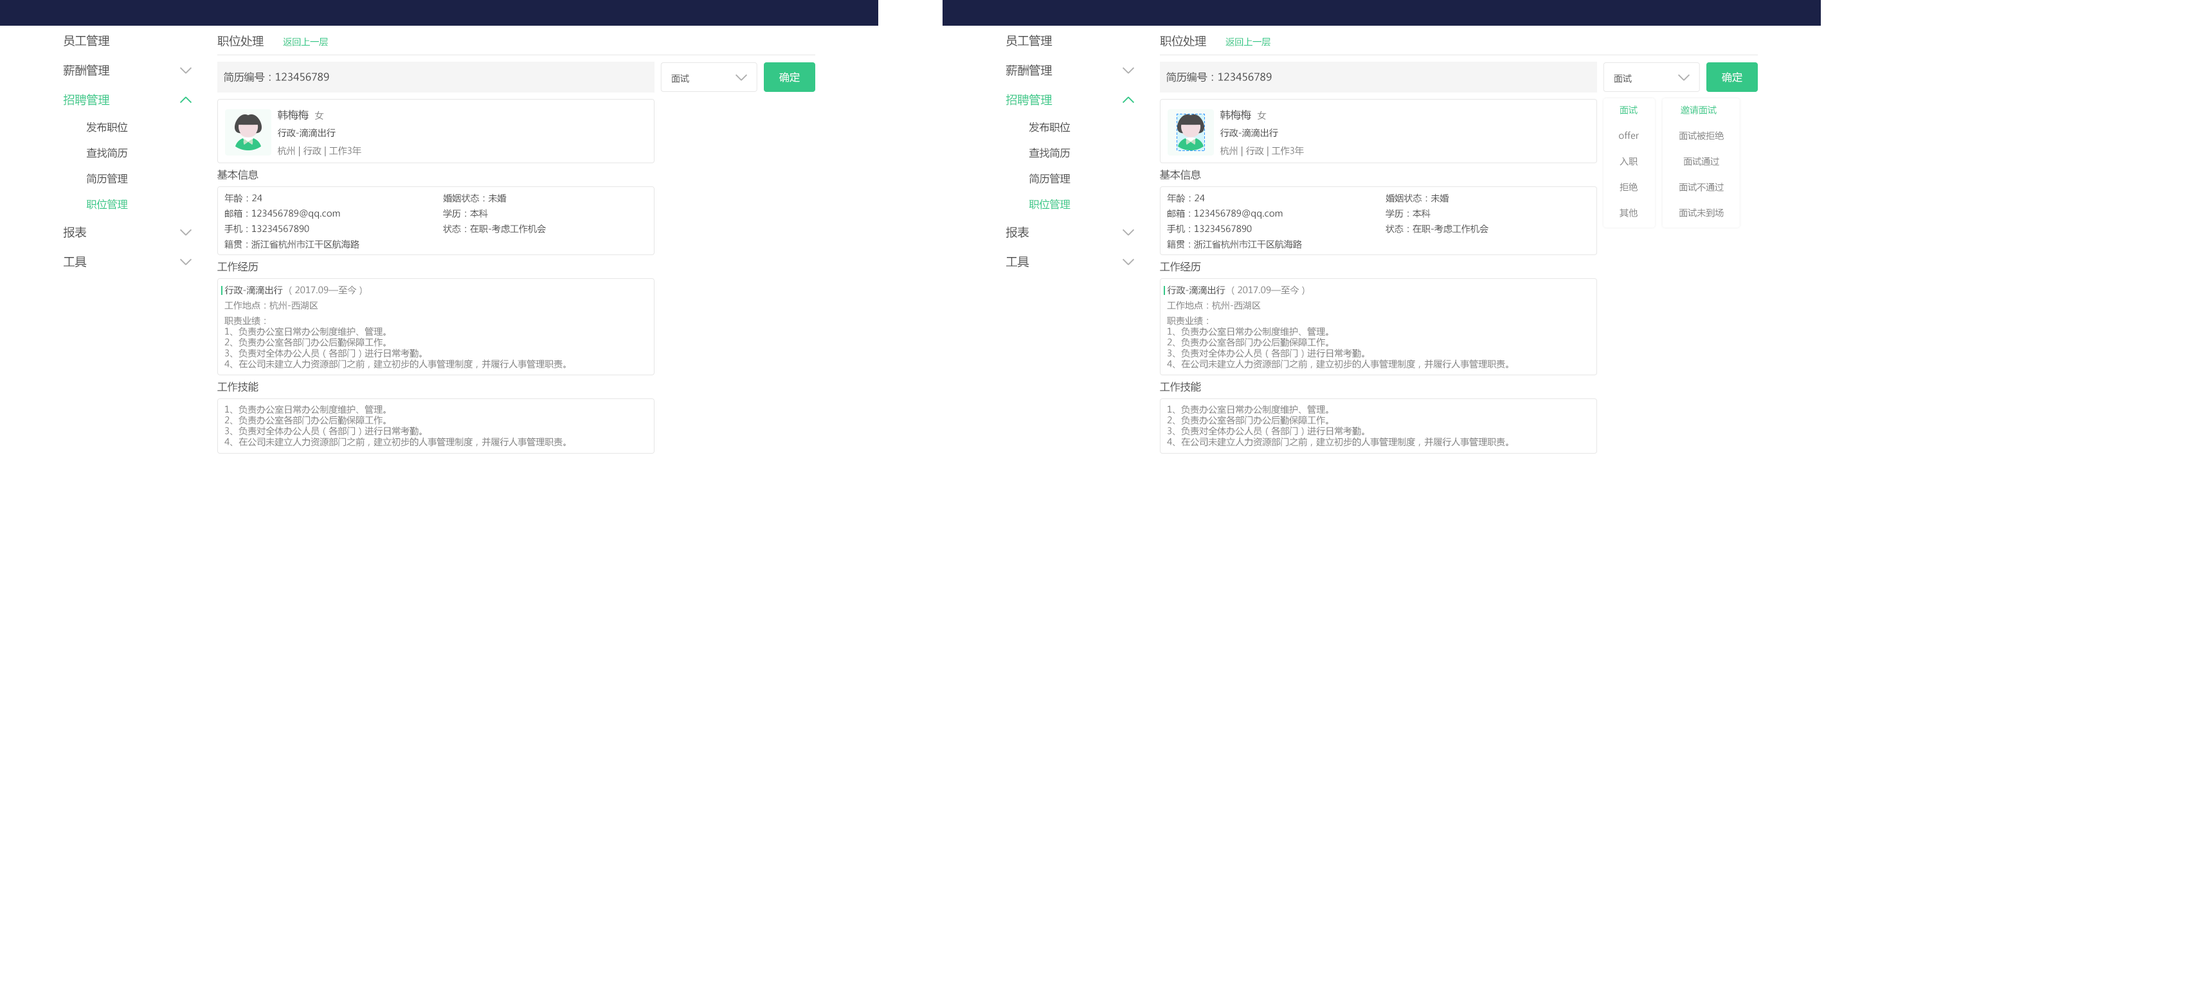
<style>
.page{position:relative;width:2195px;height:987px;background:#ffffff}
.page>*{position:absolute;margin:0}
.t1{font:11.6px "MicrosoftYaHei";color:#4d4d4d}
.t2{font:9px "MicrosoftYaHei";color:#35c787}
.t3{font:10.3px "MicrosoftYaHei";color:#4d4d4d}
.t4{font:9px "MicrosoftYaHei";color:#4d4d4d}
.t5{font:10.3px "MicrosoftYaHei";color:#ffffff}
.t6{font:11.6px "MicrosoftYaHei";color:#35c787}
.t7{font:9px "MicrosoftYaHei";color:#808080}
.t8{font:10.3px "MicrosoftYaHei";color:#35c787}
.t9{font:8.8px "MicrosoftYaHei";color:#4d4d4d}
.t10{font:8.8px "MicrosoftYaHei";color:#808080}
</style>
<div class="page">
<p class="t1" style="left:64px;top:35px;width:46px;height:11px">员工管理</p>
<p class="t1" style="left:217px;top:35px;width:47px;height:12px">职位处理</p>
<p class="t2" style="left:283px;top:37px;width:45px;height:9px">返回上一层</p>
<p class="t1" style="left:1006px;top:35px;width:46px;height:11px">员工管理</p>
<p class="t1" style="left:1160px;top:35px;width:46px;height:12px">职位处理</p>
<p class="t2" style="left:1225px;top:37px;width:45px;height:9px">返回上一层</p>
<p class="t1" style="left:63px;top:64px;width:47px;height:12px">薪酬管理</p>
<p class="t1" style="left:1005px;top:64px;width:47px;height:12px">薪酬管理</p>
<p class="t3" style="left:224px;top:72px;width:105px;height:10px">简历编号：123456789</p>
<p class="t4" style="left:671px;top:74px;width:18px;height:9px">面试</p>
<p class="t5" style="left:779px;top:72px;width:21px;height:10px">确定</p>
<p class="t3" style="left:1166px;top:72px;width:106px;height:10px">简历编号：123456789</p>
<p class="t4" style="left:1614px;top:74px;width:18px;height:9px">面试</p>
<p class="t5" style="left:1722px;top:72px;width:20px;height:10px">确定</p>
<p class="t6" style="left:63px;top:94px;width:47px;height:11px">招聘管理</p>
<p class="t6" style="left:1005px;top:94px;width:47px;height:11px">招聘管理</p>
<p class="t3" style="left:278px;top:110px;width:31px;height:10px">韩梅梅</p>
<p class="t7" style="left:315px;top:111px;width:9px;height:9px">女</p>
<p class="t3" style="left:1220px;top:110px;width:31px;height:10px">韩梅梅</p>
<p class="t7" style="left:1257px;top:111px;width:9px;height:9px">女</p>
<p class="t2" style="left:1619px;top:105px;width:18px;height:9px">面试</p>
<p class="t2" style="left:1680px;top:105px;width:36px;height:9px">邀请面试</p>
<p class="t3" style="left:86px;top:122px;width:42px;height:10px">发布职位</p>
<p class="t3" style="left:1029px;top:122px;width:41px;height:10px">发布职位</p>
<p class="t4" style="left:278px;top:128px;width:58px;height:10px">行政-滴滴出行</p>
<p class="t4" style="left:1220px;top:128px;width:58px;height:10px">行政-滴滴出行</p>
<p class="t7" style="left:1619px;top:131px;width:20px;height:9px">offer</p>
<p class="t7" style="left:1679px;top:131px;width:45px;height:9px">面试被拒绝</p>
<p class="t3" style="left:86px;top:148px;width:42px;height:10px">查找简历</p>
<p class="t7" style="left:278px;top:146px;width:83px;height:11px">杭州 | 行政 | 工作3年</p>
<p class="t3" style="left:1029px;top:148px;width:41px;height:10px">查找简历</p>
<p class="t7" style="left:1220px;top:146px;width:84px;height:11px">杭州 | 行政 | 工作3年</p>
<p class="t7" style="left:1619px;top:157px;width:18px;height:9px">入职</p>
<p class="t7" style="left:1683px;top:157px;width:36px;height:9px">面试通过</p>
<p class="t3" style="left:86px;top:174px;width:42px;height:10px">简历管理</p>
<p class="t3" style="left:217px;top:170px;width:41px;height:10px">基本信息</p>
<p class="t3" style="left:1029px;top:174px;width:41px;height:10px">简历管理</p>
<p class="t3" style="left:1160px;top:170px;width:41px;height:10px">基本信息</p>
<p class="t7" style="left:1619px;top:183px;width:18px;height:9px">拒绝</p>
<p class="t7" style="left:1679px;top:183px;width:45px;height:9px">面试不通过</p>
<p class="t4" style="left:224px;top:194px;width:38px;height:9px">年龄：24</p>
<p class="t4" style="left:443px;top:194px;width:64px;height:9px">婚姻状态：未婚</p>
<p class="t4" style="left:1167px;top:194px;width:38px;height:9px">年龄：24</p>
<p class="t4" style="left:1385px;top:194px;width:64px;height:9px">婚姻状态：未婚</p>
<p class="t8" style="left:86px;top:199px;width:42px;height:11px">职位管理</p>
<p class="t9" style="left:225px;top:209px;width:115px;height:10px">邮箱：123456789@qq.com</p>
<p class="t9" style="left:443px;top:209px;width:45px;height:9px">学历：本科</p>
<p class="t8" style="left:1029px;top:199px;width:41px;height:11px">职位管理</p>
<p class="t9" style="left:1167px;top:209px;width:115px;height:10px">邮箱：123456789@qq.com</p>
<p class="t9" style="left:1385px;top:209px;width:45px;height:9px">学历：本科</p>
<p class="t7" style="left:1619px;top:208px;width:18px;height:9px">其他</p>
<p class="t7" style="left:1679px;top:208px;width:45px;height:9px">面试未到场</p>
<p class="t1" style="left:63px;top:226px;width:24px;height:12px">报表</p>
<p class="t4" style="left:224px;top:224px;width:85px;height:9px">手机：13234567890</p>
<p class="t4" style="left:443px;top:224px;width:103px;height:9px">状态：在职-考虑工作机会</p>
<p class="t1" style="left:1005px;top:226px;width:24px;height:12px">报表</p>
<p class="t4" style="left:1167px;top:224px;width:85px;height:9px">手机：13234567890</p>
<p class="t4" style="left:1385px;top:224px;width:103px;height:9px">状态：在职-考虑工作机会</p>
<p class="t4" style="left:224px;top:240px;width:135px;height:9px">籍贯：浙江省杭州市江干区航海路</p>
<p class="t4" style="left:1167px;top:240px;width:135px;height:9px">籍贯：浙江省杭州市江干区航海路</p>
<p class="t1" style="left:64px;top:256px;width:23px;height:11px">工具</p>
<p class="t1" style="left:1006px;top:256px;width:23px;height:11px">工具</p>
<p class="t3" style="left:217px;top:262px;width:41px;height:10px">工作经历</p>
<p class="t3" style="left:1160px;top:262px;width:41px;height:10px">工作经历</p>
<p class="t4" style="left:224px;top:285px;width:59px;height:10px">行政-滴滴出行</p>
<p class="t7" style="left:289px;top:285px;width:73px;height:10px">（2017.09—至今）</p>
<p class="t4" style="left:1167px;top:285px;width:58px;height:10px">行政-滴滴出行</p>
<p class="t7" style="left:1232px;top:285px;width:72px;height:10px">（2017.09—至今）</p>
<p class="t10" style="left:224px;top:301px;width:94px;height:9px">工作地点：杭州-西湖区</p>
<p class="t10" style="left:1167px;top:301px;width:94px;height:9px">工作地点：杭州-西湖区</p>
<p class="t7" style="left:224px;top:316px;width:342px;height:53px">职责业绩：<br>1、负责办公室日常办公制度维护、管理。<br>2、负责办公室各部门办公后勤保障工作。<br>3、负责对全体办公人员（各部门）进行日常考勤。<br>4、在公司未建立人力资源部门之前，建立初步的人事管理制度，并履行人事管理职责。</p>
<p class="t7" style="left:1167px;top:316px;width:341px;height:53px">职责业绩：<br>1、负责办公室日常办公制度维护、管理。<br>2、负责办公室各部门办公后勤保障工作。<br>3、负责对全体办公人员（各部门）进行日常考勤。<br>4、在公司未建立人力资源部门之前，建立初步的人事管理制度，并履行人事管理职责。</p>
<p class="t3" style="left:217px;top:381px;width:41px;height:11px">工作技能</p>
<p class="t3" style="left:1160px;top:381px;width:41px;height:11px">工作技能</p>
<p class="t7" style="left:224px;top:405px;width:342px;height:42px">1、负责办公室日常办公制度维护、管理。<br>2、负责办公室各部门办公后勤保障工作。<br>3、负责对全体办公人员（各部门）进行日常考勤。<br>4、在公司未建立人力资源部门之前，建立初步的人事管理制度，并履行人事管理职责。</p>
<p class="t7" style="left:1167px;top:405px;width:341px;height:42px">1、负责办公室日常办公制度维护、管理。<br>2、负责办公室各部门办公后勤保障工作。<br>3、负责对全体办公人员（各部门）进行日常考勤。<br>4、在公司未建立人力资源部门之前，建立初步的人事管理制度，并履行人事管理职责。</p>
</div>
